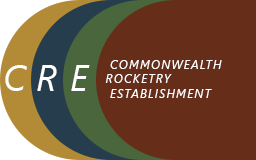
<style>
.page{position:relative;width:256px;height:160px;background:#662d19}
.page>*{position:absolute;margin:0}
.t1{font:36px "SegoeUI-Italic";letter-spacing:0.1em;color:#ffffff}
.t2{font:12px "SegoeUI-Italic";letter-spacing:0.1em;color:#ffffff}
</style>
<div class="page">
<p class="t1" style="left:5px;top:65px;width:22px;height:26px">C</p>
<p class="t1" style="left:37px;top:65px;width:20px;height:26px">R</p>
<p class="t1" style="left:71px;top:65px;width:19px;height:26px">E</p>
<p class="t2" style="left:105px;top:60px;width:117px;height:38px">COMMONWEALTH<br>ROCKETRY<br> ESTABLISHMENT</p>
</div>
